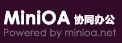
<style>
.page{position:relative;width:122px;height:43px;background:#310b28}
.page>*{position:absolute;margin:0}
.t1{font:18px "CenturyGothic-Bold";color:#ffffff;font-weight:bold}
.t2{font:10px "MicrosoftYaHei";color:#ffffff;font-weight:bold}
.t3{font:10px "CenturyGothic";color:#816a7b}
</style>
<div class="page">
<p class="t1" style="left:4px;top:10px;width:66px;height:15px">MiniOA</p>
<p class="t2" style="left:74px;top:14px;width:41px;height:11px">协同办公</p>
<p class="t3" style="left:4px;top:28px;width:112px;height:11px">Powered by minioa.net</p>
</div>
